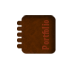
<style>
.page{position:relative;width:69px;height:69px;background:#ffffff}
.page>*{position:absolute;margin:0}
.t1{font:9.5px "MyriadPro-BoldCond";color:#883013}
</style>
<div class="page">
<p class="t1" style="left:42px;top:20px;width:7px;height:30px;rotate:-90deg">Portfolio</p>
</div>
